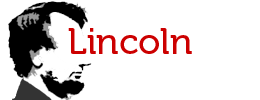
<style>
.page{position:relative;width:260px;height:100px;background:#ffffff}
.page>*{position:absolute;margin:0}
.t1{font:36px "Museo-500";color:#cc0000}
</style>
<div class="page">
<p class="t1" style="left:68px;top:28px;width:124px;height:26px">Lincoln</p>
</div>
